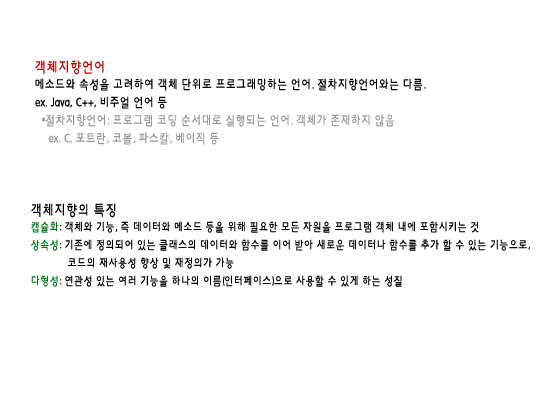
<style>
.page{position:relative;width:550px;height:400px;background:#ffffff}
.page>*{position:absolute;margin:0}
.t1{font:13px/18px "HYkanM";letter-spacing:-0.01em;color:#999999;scale:0.8 1}
.t2{font:15px/18px "HYkanM";letter-spacing:-0.01em;color:#c80000;scale:0.8 1}
.t3{font:13px/18px "HYkanM";letter-spacing:-0.01em;color:#000000;scale:0.8 1}
.t4{font:12px/18px "HYkanM";letter-spacing:-0.01em;color:#000000;scale:0.8 1}
.t5{font:15px/18px "HYkanM";letter-spacing:-0.01em;color:#000000;scale:0.8 1}
.t6{font:12px/18px "HYkanM";letter-spacing:-0.01em;color:#007917;scale:0.8 1}
</style>
<div class="page">
<p class="t1" style="left:35px;top:60px;width:391px;height:85px"><span class="t2">객체지향언어<br></span><span class="t3">메소드와 속성을 고려하여 객체 단위로 프로그래밍하는 언어. 절차지향언어와는 다름.<br>ex. Java, C++, 비주얼 언어 등<br></span>  *절차지향언어: 프로그램 코딩 순서대로 실행되는 언어. 객체가 존재하지 않음 <br>    ex. C, 포트란, 코볼, 파스칼, 베이직 등</p>
<p class="t4" style="left:31px;top:203px;width:499px;height:84px"><span class="t5">객체지향의 특징<br></span><span class="t6">캡슐화</span>: 객체와 기능, 즉 데이터와 메소드 등을 위해 필요한 모든 자원을 프로그램 객체 내에 포함시키는 것<br><span class="t6">상속성</span>: 기존에 정의되어 있는 클래스의 데이터와 함수를 이어 받아 새로운 데이터나 함수를 추가 할 수 있는 기능으로, <br>            코드의 재사용성 향상 및 재정의가 가능<br><span class="t6">다형성</span>: 연관성 있는 여러 기능을 하나의 이름(인터페이스)으로 사용할 수 있게 하는 성질</p>
</div>
